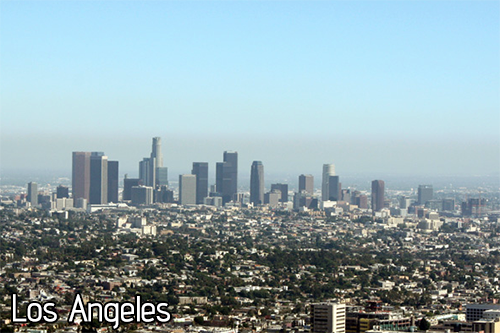
<style>
.page{position:relative;width:500px;height:333px}
.page>*{position:absolute;margin:0}
.t1{font:36px "advent-ExtraBold";color:#ffffff}
</style>
<div class="page">
<p class="t1" style="left:13px;top:294px;width:157px;height:35px">Los Angeles</p>
</div>
